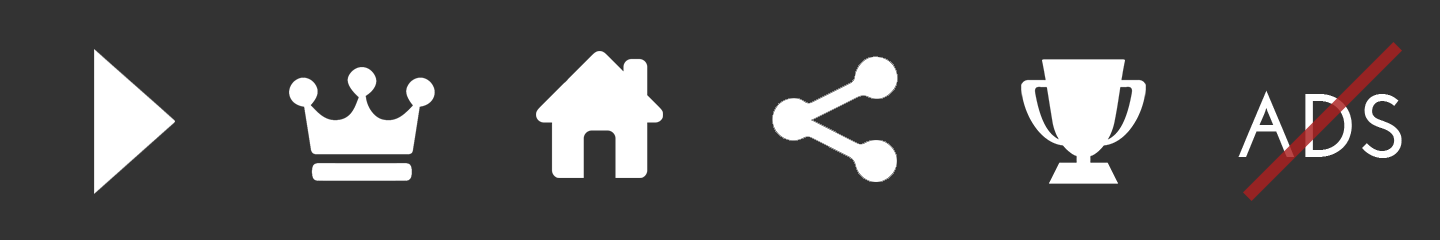
<style>
.page{position:relative;width:1440px;height:240px;background:#333333}
.page>*{position:absolute;margin:0}
.t1{font:90px "JosefinSans-Bold";color:#ffffff}
</style>
<div class="page">
<p class="t1" style="left:1238px;top:90px;width:164px;height:68px">ADS</p>
</div>
